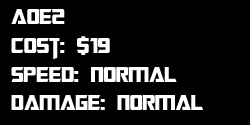
<style>
.page{position:relative;width:250px;height:125px;background:#000000}
.page>*{position:absolute;margin:0}
.t1{font:24px "TransformersMovie";color:#ffffff}
</style>
<div class="page">
<p class="t1" style="left:11px;top:9px;width:192px;height:101px">Aoe2<br>Cost: $19<br>Speed: Normal<br>Damage: Normal</p>
</div>
